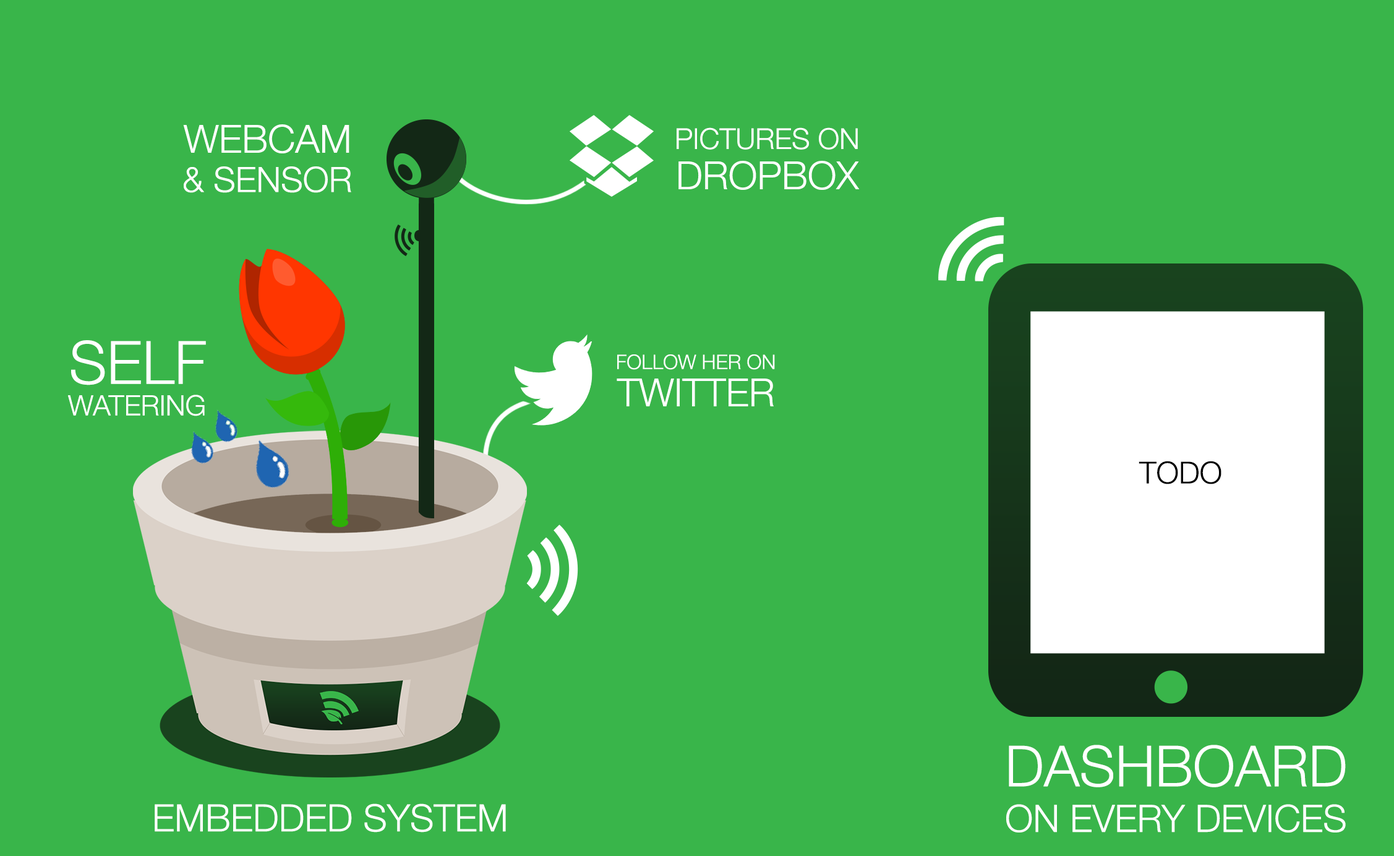
<style>
.page{position:relative;width:1394px;height:856px;background:#39b54a}
.page>*{position:absolute;margin:0}
.t1{font:38.8px "HelveticaNeue-Light";color:#ffffff;text-transform:uppercase}
.t2{font:28.8px "HelveticaNeue-Light";color:#ffffff;text-transform:uppercase}
.t3{font:35px "HelveticaNeue-Light";color:#ffffff;text-transform:uppercase}
.t4{font:59.8px "HelveticaNeue-Light";color:#ffffff;text-transform:uppercase}
.t5{font:20.1px "HelveticaNeue-Light";color:#ffffff;text-transform:uppercase}
.t6{font:28px "HelveticaNeue-Light";color:#ffffff;text-transform:uppercase}
.t7{font:30.4px "HelveticaNeue-Light";color:#010101}
.t8{font:56.7px "HelveticaNeue-Light";color:#ffffff;text-transform:uppercase}
.t9{font:37.7px "HelveticaNeue-Light";color:#ffffff;text-transform:uppercase}
</style>
<div class="page">
<p class="t1" style="left:183px;top:124px;width:166px;height:29px">WEBCAM</p>
<p class="t2" style="left:676px;top:127px;width:182px;height:23px">PICTURES ON</p>
<p class="t1" style="left:678px;top:161px;width:181px;height:29px">DROPBOX</p>
<p class="t3" style="left:184px;top:166px;width:167px;height:27px">&amp; SENsor</p>
<p class="t4" style="left:71px;top:340px;width:135px;height:45px">SELF</p>
<p class="t5" style="left:617px;top:354px;width:158px;height:16px">follow her on</p>
<p class="t1" style="left:616px;top:378px;width:157px;height:28px">twitter</p>
<p class="t6" style="left:68px;top:394px;width:137px;height:22px">WATERING</p>
<p class="t7" style="left:1138px;top:461px;width:83px;height:23px">TODO</p>
<p class="t8" style="left:1008px;top:744px;width:337px;height:43px">DASHBOARD</p>
<p class="t9" style="left:155px;top:803px;width:351px;height:29px">Embedded system</p>
<p class="t9" style="left:1006px;top:804px;width:339px;height:28px">On every devices</p>
</div>
